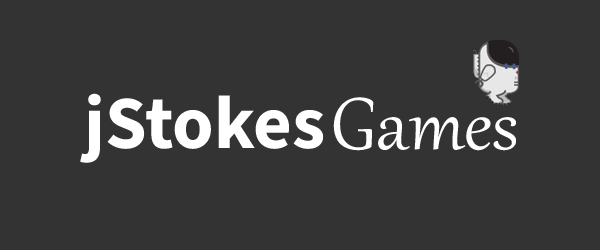
<style>
.page{position:relative;width:600px;height:250px;background:#333333}
.page>*{position:absolute;margin:0}
.t1{font:75px "SourceSans3Roman-Bold";color:#ffffff}
.t2{font:90px "Gabriola";color:#ffffff}
</style>
<div class="page">
<p class="t1" style="left:80px;top:93px;width:244px;height:70px">jStokes</p>
<p class="t2" style="left:333px;top:97px;width:183px;height:54px">Games</p>
</div>
